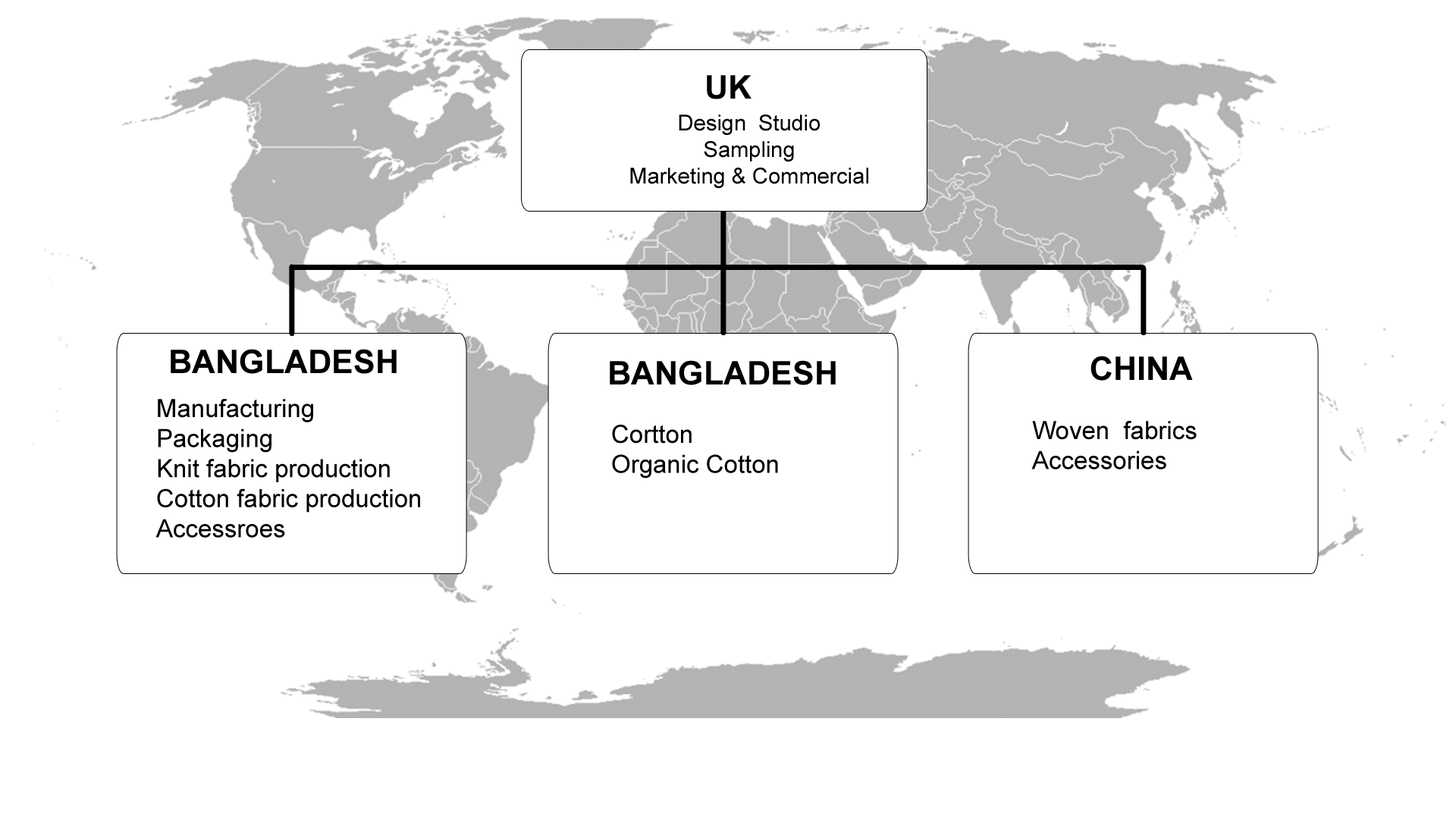
<style>
.page{position:relative;width:1456px;height:819px;background:#ffffff}
.page>*{position:absolute;margin:0}
.t1{font:32.6px "Arial-BoldMT";color:#000000}
.t2{font:22px "ArialMT";color:#000000}
.t3{font:25px "ArialMT";color:#000000}
</style>
<div class="page">
<p class="t1" style="left:707px;top:75px;width:44px;height:24px">UK</p>
<p class="t2" style="left:630px;top:115px;width:238px;height:73px;text-align:center">Design  Studio<br>Sampling<br>Marketing &amp; Commercial</p>
<p class="t1" style="left:171px;top:349px;width:226px;height:25px">BANGLADESH</p>
<p class="t1" style="left:610px;top:360px;width:226px;height:25px">BANGLADESH</p>
<p class="t1" style="left:1090px;top:356px;width:103px;height:25px">CHINA</p>
<p class="t3" style="left:155px;top:399px;width:265px;height:139px">Manufacturing<br>Packaging<br>Knit fabric production<br>Cotton fabric production <br>Accessroes</p>
<p class="t3" style="left:612px;top:425px;width:166px;height:54px">Cortton <br>Organic Cotton</p>
<p class="t3" style="left:1031px;top:421px;width:166px;height:48px">Woven  fabrics<br>Accessories</p>
</div>
